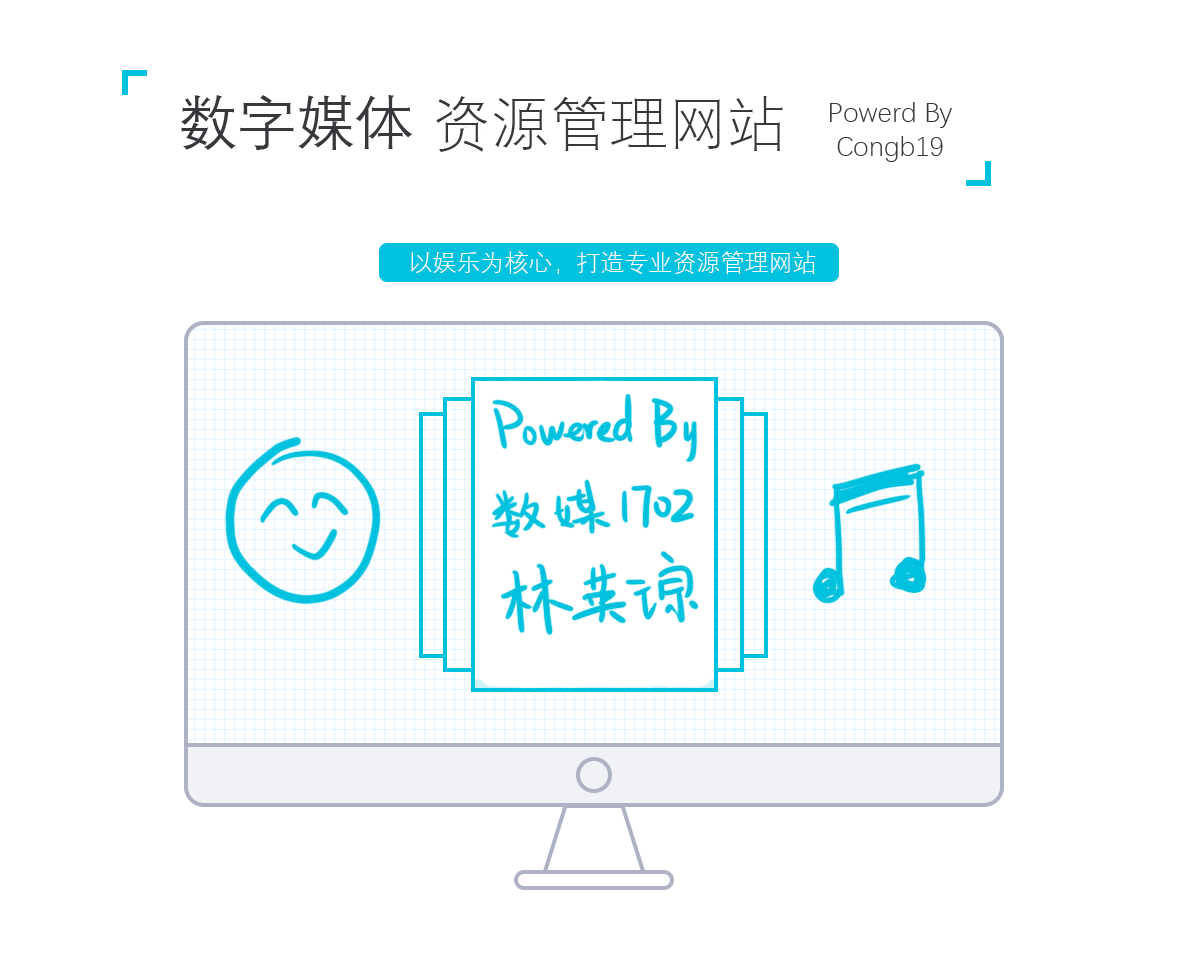
<style>
.page{position:relative;width:1178px;height:960px;background:#ffffff}
.page>*{position:absolute;margin:0}
.t1{font:59px "DengXian";color:#36383c}
.t2{font:59px "DengXian-Light";color:#36383c}
.t3{font:28px "DengXian-Light";color:#36383c}
.t4{font:24px "DengXian-Light";color:#ffffff}
</style>
<div class="page">
<p class="t1" style="left:181px;top:95px;width:232px;height:55px">数字媒体</p>
<p class="t2" style="left:436px;top:96px;width:347px;height:56px">资源管理网站</p>
<p class="t3" style="left:830px;top:102px;width:122px;height:60px;text-align:center">Powerd By<br>Congb19</p>
<p class="t4" style="left:411px;top:251px;width:405px;height:23px">以娱乐为核心，打造专业资源管理网站</p>
</div>
